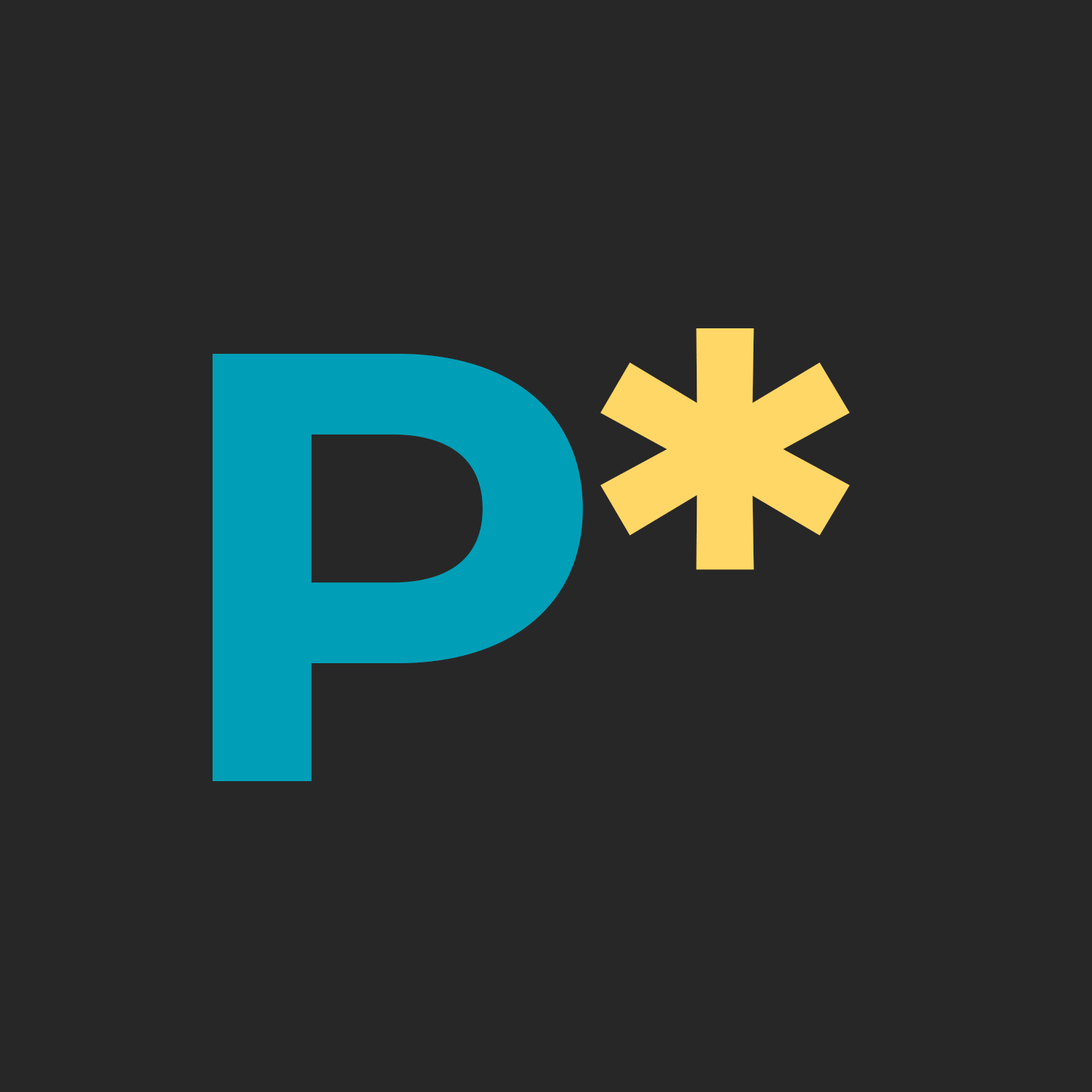
<style>
.page{position:relative;width:1092px;height:1092px;background:#272727}
.page>*{position:absolute;margin:0}
.t1{font:610.4px "Montserrat-Bold";letter-spacing:-0.025em;color:#009fb7;text-transform:uppercase}
.t2{font:610.4px "Montserrat-Bold";letter-spacing:-0.025em;color:#fed766;text-transform:uppercase}
</style>
<div class="page">
<p class="t1" style="left:213px;top:328px;width:637px;height:453px">P<span class="t2">*</span></p>
</div>
